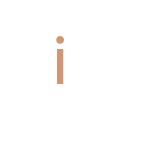
<style>
.page{position:relative;width:157px;height:157px;background:#ffffff}
.page>*{position:absolute;margin:0}
.t1{font:71.7px "MyriadPro-Regular";color:#d09772}
</style>
<div class="page">
<p class="t1" style="left:56px;top:36px;width:8px;height:48px">i</p>
</div>
